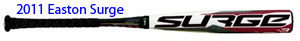
<style>
.page{position:relative;width:300px;height:41px;background:#fefefe}
.page>*{position:absolute;margin:0}
.t1{font:14px "MyriadPro-Regular";color:#0000ff}
</style>
<div class="page">
<p class="t1" style="left:16px;top:4px;width:108px;height:13px">2011 Easton Surge</p>
</div>
